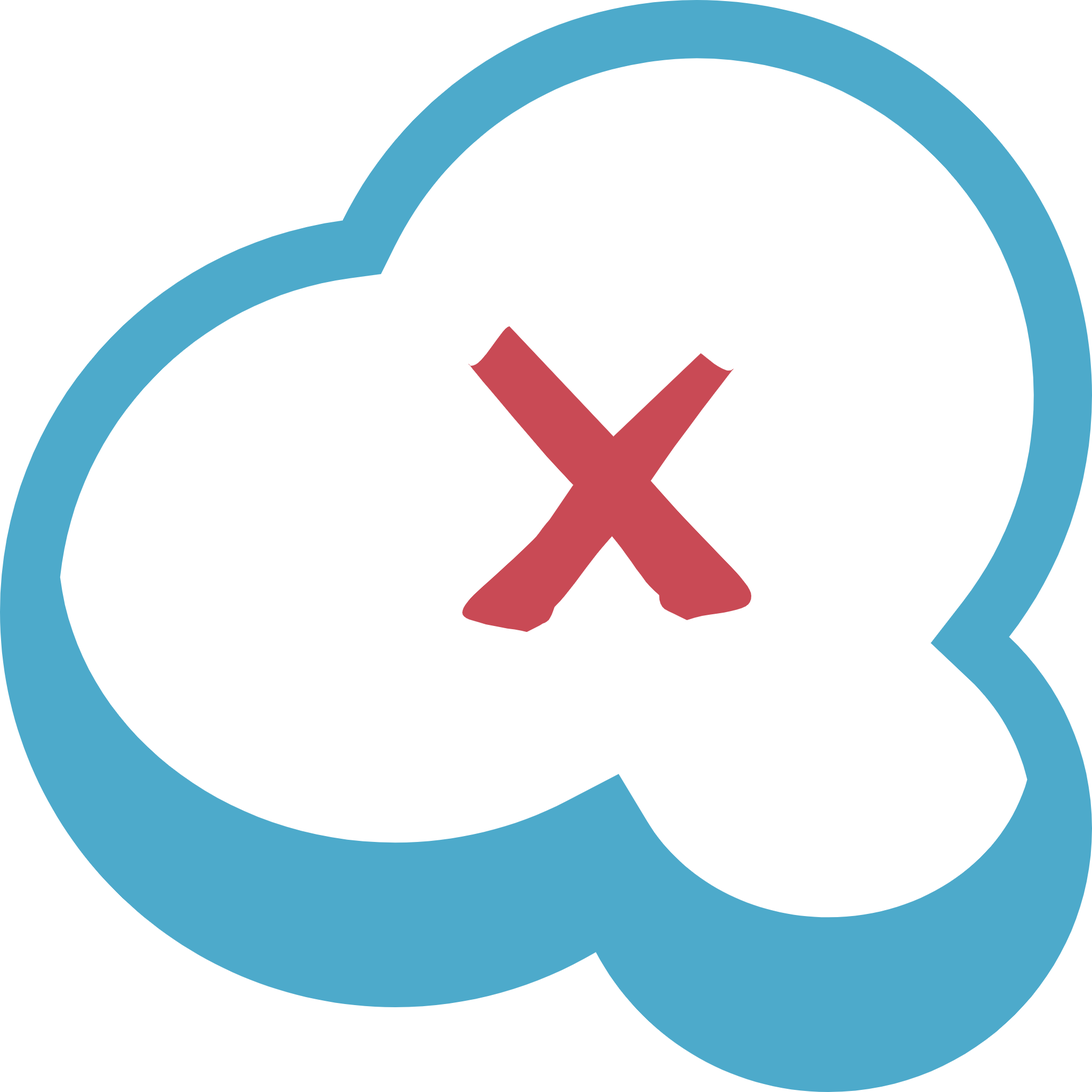
<style>
.page{position:relative;width:1092px;height:1092px;background:#ffffff}
.page>*{position:absolute;margin:0}
.t1{font:693.2px "Dokdo-Regular";color:#c94a55}
</style>
<div class="page">
<p class="t1" style="left:462px;top:326px;width:290px;height:306px">X</p>
</div>
